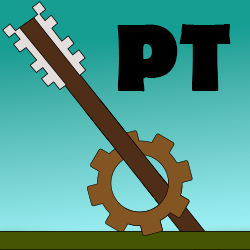
<style>
.page{position:relative;width:250px;height:250px}
.page>*{position:absolute;margin:0}
.t1{font:96px "BerlinSansFB-Bold";color:#000000}
</style>
<div class="page">
<p class="t1" style="left:117px;top:24px;width:114px;height:68px">PT</p>
</div>
